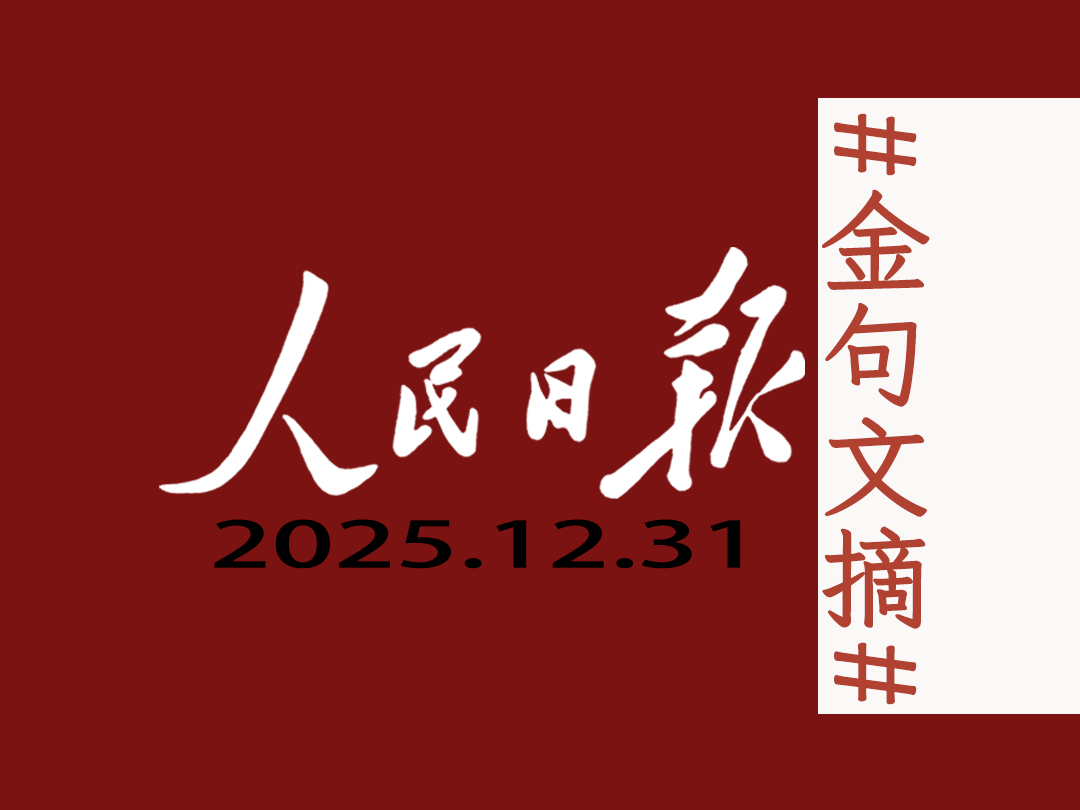
<style>
.page{position:relative;width:1080px;height:810px;background:#7b1312}
.page>*{position:absolute;margin:0}
.t1{font:111.8px "LXGWWenKaiGBScreenR";color:#b14131}
.t2{font:62.7px "AdobeHeitiStd-Regular";color:#000000;scale:1.77 1}
</style>
<div class="page">
<p class="t1" style="left:822px;top:113px;width:108px;height:592px">#金句文摘 #</p>
<p class="t2" style="left:214px;top:519px;width:527px;height:50px">2025.12.31</p>
</div>
